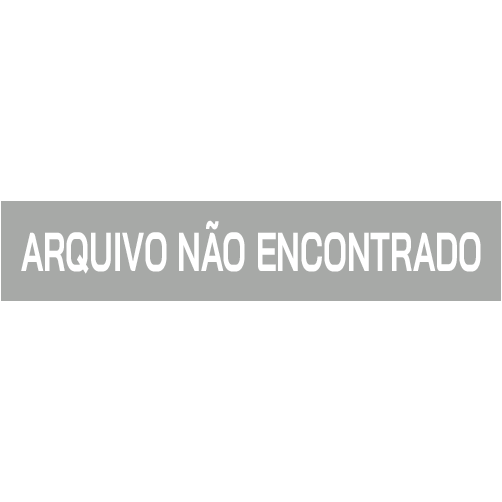
<style>
.page{position:relative;width:502px;height:502px;background:#ffffff}
.page>*{position:absolute;margin:0}
.t1{font:54.7px "BaiJamjuree-Bold";color:#ffffff;scale:0.6 1}
</style>
<div class="page">
<p class="t1" style="left:21px;top:220px;width:460px;height:54px">ARQUIVO NÃO ENCONTRADO</p>
</div>
